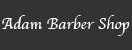
<style>
.page{position:relative;width:132px;height:50px;background:#333333}
.page>*{position:absolute;margin:0}
.t1{font:16px "Apple-Chancery";color:#ffffff}
</style>
<div class="page">
<p class="t1" style="left:2px;top:15px;width:128px;height:21px">Adam Barber Shop</p>
</div>
